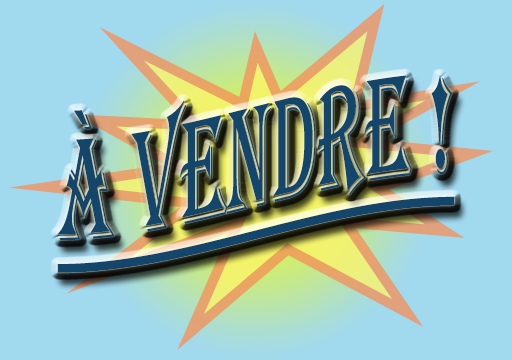
<style>
.page{position:relative;width:512px;height:360px;background:#a1d9ef}
.page>*{position:absolute;margin:0}
.t1{font:150px "Algerian";color:#14466c;text-decoration:underline;scale:0.5 1}
</style>
<div class="page">
<p class="t1" style="left:57px;top:75px;width:398px;height:198px">À VENDRE !</p>
</div>
